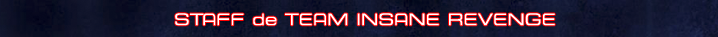
<style>
.page{position:relative;width:718px;height:37px}
.page>*{position:absolute;margin:0}
.t1{font:16px "ESL-eSport-Ext-Light";color:#ffffff}
</style>
<div class="page">
<p class="t1" style="left:175px;top:13px;width:380px;height:13px">STAFF de TEAM INSANE REVENGE</p>
</div>
